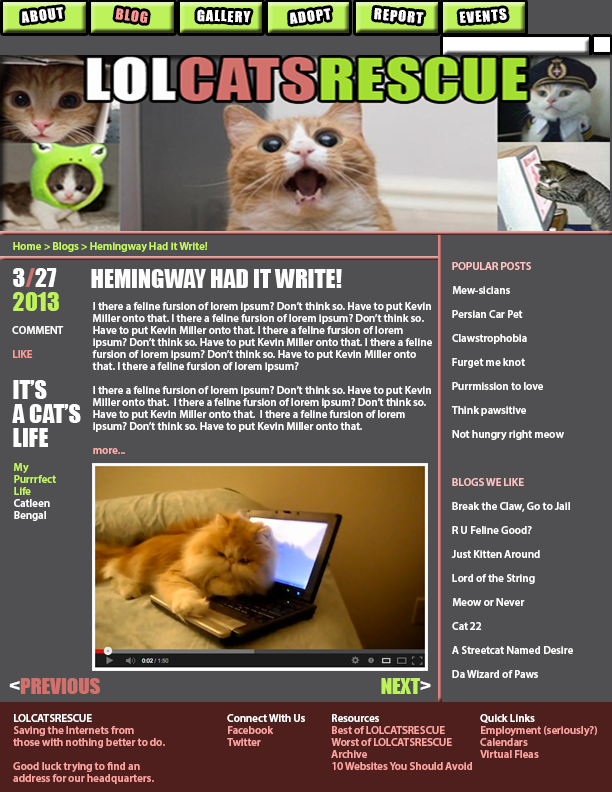
<style>
.page{position:relative;width:612px;height:792px;background:#505052}
.page>*{position:absolute;margin:0}
.t1{font:14px "Impact";letter-spacing:0.075em;color:#ffffff;scale:1.03 1}
.t2{font:14px "Impact";letter-spacing:0.075em;color:#fd9994;scale:1.03 1}
.t3{font:14px "Impact";letter-spacing:0.075em;color:#fdfdfd;scale:1.03 1}
.t4{font:11px "MyriadPro-Semibold";color:#c3f95d}
.t5{font:24px/24px "Impact";color:#bef25a}
.t6{font:24px/24px "Impact";color:#fdfdfd}
.t7{font:24px/24px "Impact";color:#d2716c}
.t8{font:24px "Impact";color:#fdfdfd}
.t9{font:11px/24px "MyriadPro-Semibold";color:#fdfdfd}
.t10{font:11px/24px "MyriadPro-Semibold";color:#fdc1c1}
.t11{font:11px/12px "MyriadPro-Semibold";color:#ffffff}
.t12{font:11px/12px "MyriadPro-Semibold";color:#fdfdfd}
.t13{font:11px/12px "MyriadPro-Semibold";color:#fcada9}
.t14{font:11px/12px "MyriadPro-Semibold";color:#fe9994}
.t15{font:11px/12px "MyriadPro-Semibold";color:#c3f95d}
.t16{font:20.4px "Impact";color:#d2716c}
.t17{font:20.4px "Impact";color:#fdfdfd}
.t18{font:20.4px "Impact";color:#bef25a}
.t19{font:11px/12px "MyriadPro-Semibold";color:#fda29e}
</style>
<div class="page">
<p class="t1" style="left:22px;top:7px;width:41px;height:16px;rotate:-7deg">ABOUT</p>
<p class="t2" style="left:115px;top:8px;width:33px;height:15px;rotate:7deg">BLOG</p>
<p class="t1" style="left:197px;top:9px;width:54px;height:14px;rotate:2deg">GALLERY</p>
<p class="t1" style="left:290px;top:8px;width:41px;height:16px;rotate:-8deg">ADOPT</p>
<p class="t3" style="left:374px;top:8px;width:50px;height:16px;rotate:5deg">REPORT</p>
<p class="t1" style="left:459px;top:8px;width:48px;height:15px;rotate:-4deg">EVENTS</p>
<p class="t4" style="left:13px;top:242px;width:195px;height:10px">Home &gt; Blogs &gt; Hemingway Had it Write!</p>
<p class="t5" style="left:13px;top:268px;width:46px;height:43px"><span class="t6">3</span><span class="t7">/</span><span class="t6">27<br></span>2013</p>
<p class="t8" style="left:91px;top:269px;width:251px;height:19px">HEMINGWAY HAD IT WRITE!</p>
<p class="t9" style="left:451px;top:262px;width:122px;height:416px"><span class="t10">POPULAR POSTS<br></span>Mew-sicians<br>Persian Car Pet<br>Clawstrophobia<br>Furget me knot<br>Purrmission to love<br>Think pawsitive<br>Not hungry right meow<br><br><span class="t10">BLOGS WE LIKE<br></span>Break the Claw, Go to Jail<br>R U Feline Good?<br>Just Kitten Around<br>Lord of the String<br>Meow or Never<br>Cat 22<br>A Streetcat Named Desire<br>Da Wizard of Paws</p>
<p class="t11" style="left:92px;top:302px;width:340px;height:152px"><span class="t12"><br><br></span>I there a feline fursion of lorem ipsum? Don’t think so. Have to put Kevin Miller onto that. I there a feline fursion of lorem ipsum? Don’t think so. Have to put Kevin Miller onto that. I there a feline fursion of lorem ipsum? Don’t think so. Have to put Kevin Miller onto that. I there a feline fursion of lorem ipsum? Don’t think so. Have to put Kevin Miller onto that. I there a feline fursion of lorem ipsum? <br><br>I there a feline fursion of lorem ipsum? Don’t think so. Have to put Kevin Miller onto that.  I there a feline fursion of lorem ipsum? Don’t think so. Have to put Kevin Miller onto that.  I there a feline fursion of lorem ipsum? Don’t think so. Have to put Kevin Miller onto that. <br><br><span class="t13">more...</span></p>
<p class="t12" style="left:12px;top:326px;width:52px;height:32px">COMMENT<br><br><span class="t14">LIKE</span></p>
<p class="t6" style="left:12px;top:380px;width:69px;height:67px">IT’S <br>A CAT’S <br>LIFE</p>
<p class="t15" style="left:14px;top:463px;width:42px;height:58px">My <br>Purrrfect <br>Life<br><span class="t12">Catleen Bengal</span></p>
<p class="t16" style="left:9px;top:678px;width:422px;height:16px"><span class="t17">&lt;</span>PREVIOUS          <span class="t18">NEXT</span><span class="t17">&gt;</span></p>
<p class="t19" style="left:13px;top:714px;width:152px;height:70px"><span class="t11">LOLCATSRESCUE<br></span>Saving the Internets from <br>those with nothing better to do.<br><br>Good luck trying to find an <br>address for our headquarters.</p>
<p class="t19" style="left:227px;top:714px;width:78px;height:32px"><span class="t11">Connect With Us<br></span>Facebook<br>Twitter</p>
<p class="t19" style="left:331px;top:714px;width:141px;height:56px"><span class="t11">Resources<br></span>Best of LOLCATSRESCUE<br>Worst of LOLCATSRESCUE<br>Archive<br>10 Websites You Should Avoid</p>
<p class="t19" style="left:480px;top:714px;width:117px;height:44px"><span class="t11">Quick Links<br></span>Employment (seriously?)<br>Calendars<br>Virtual Fleas</p>
</div>
